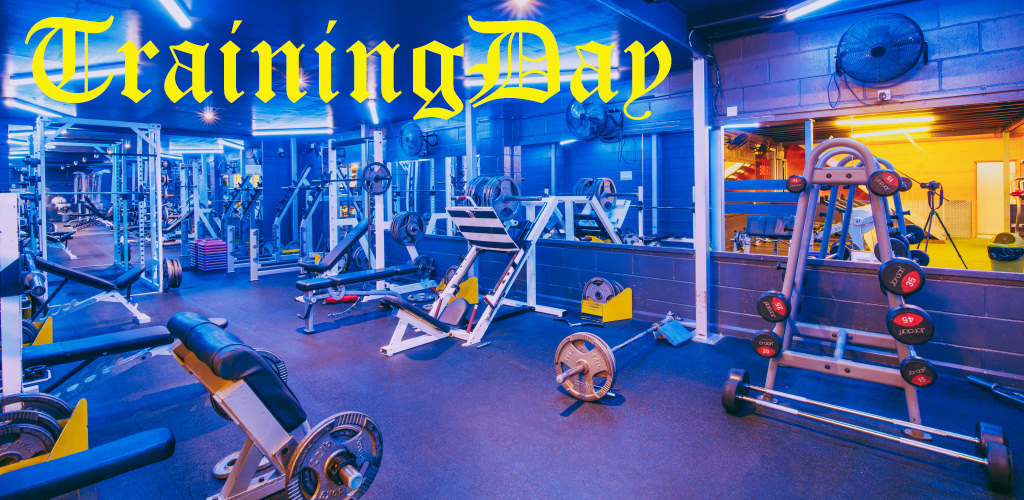
<style>
.page{position:relative;width:1024px;height:500px}
.page>*{position:absolute;margin:0}
.t1{font:120px "OldEnglishTextMT";color:#fbf203}
</style>
<div class="page">
<p class="t1" style="left:25px;top:15px;width:647px;height:105px">TrainingDay</p>
</div>
